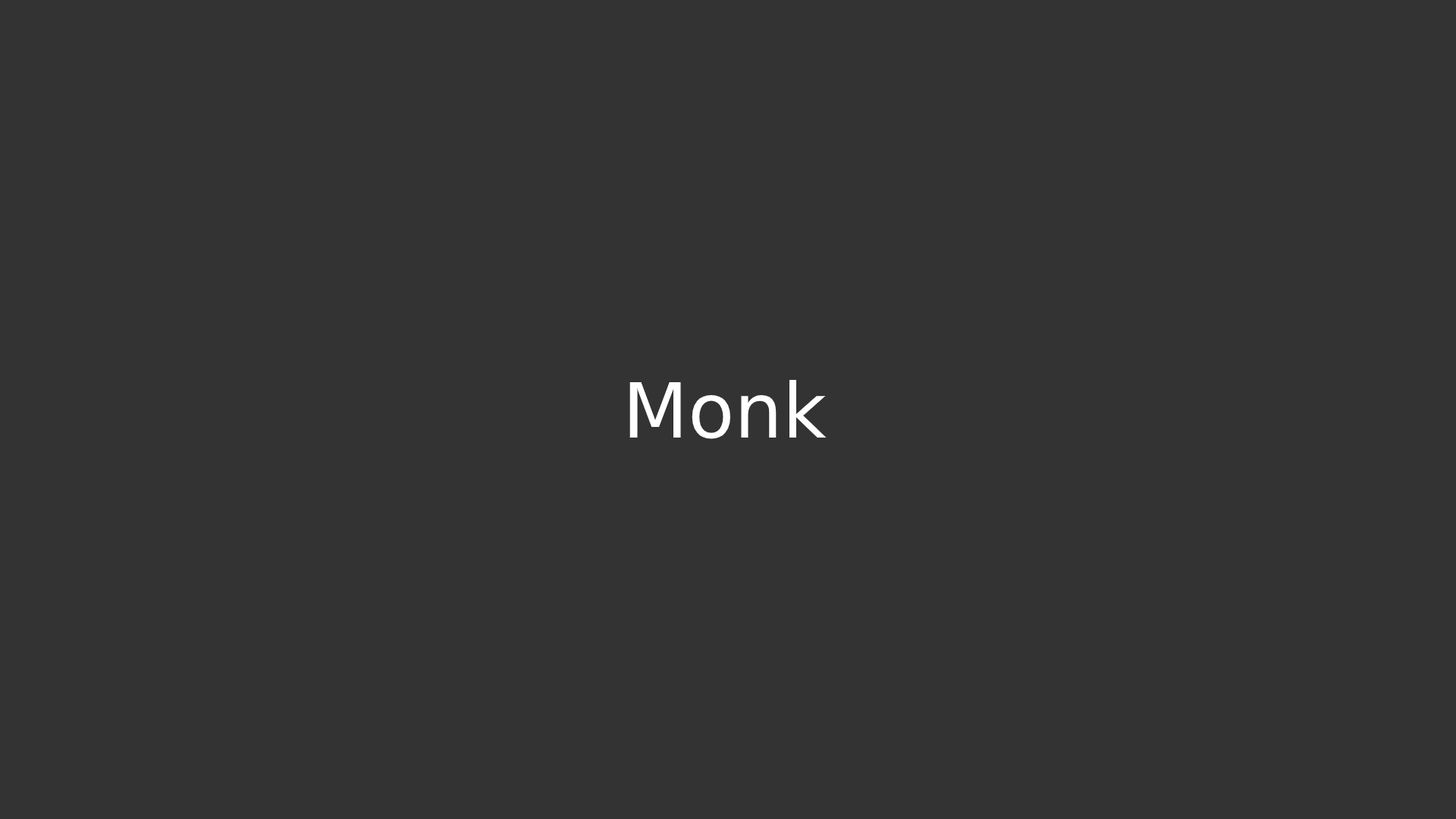
<style>
.page{position:relative;width:1456px;height:819px;background:#333333}
.page>*{position:absolute;margin:0}
.t1{font:75.8px "DejaVuSans";color:#ffffff}
</style>
<div class="page">
<p class="t1" style="left:629px;top:380px;width:198px;height:59px">Monk</p>
</div>
